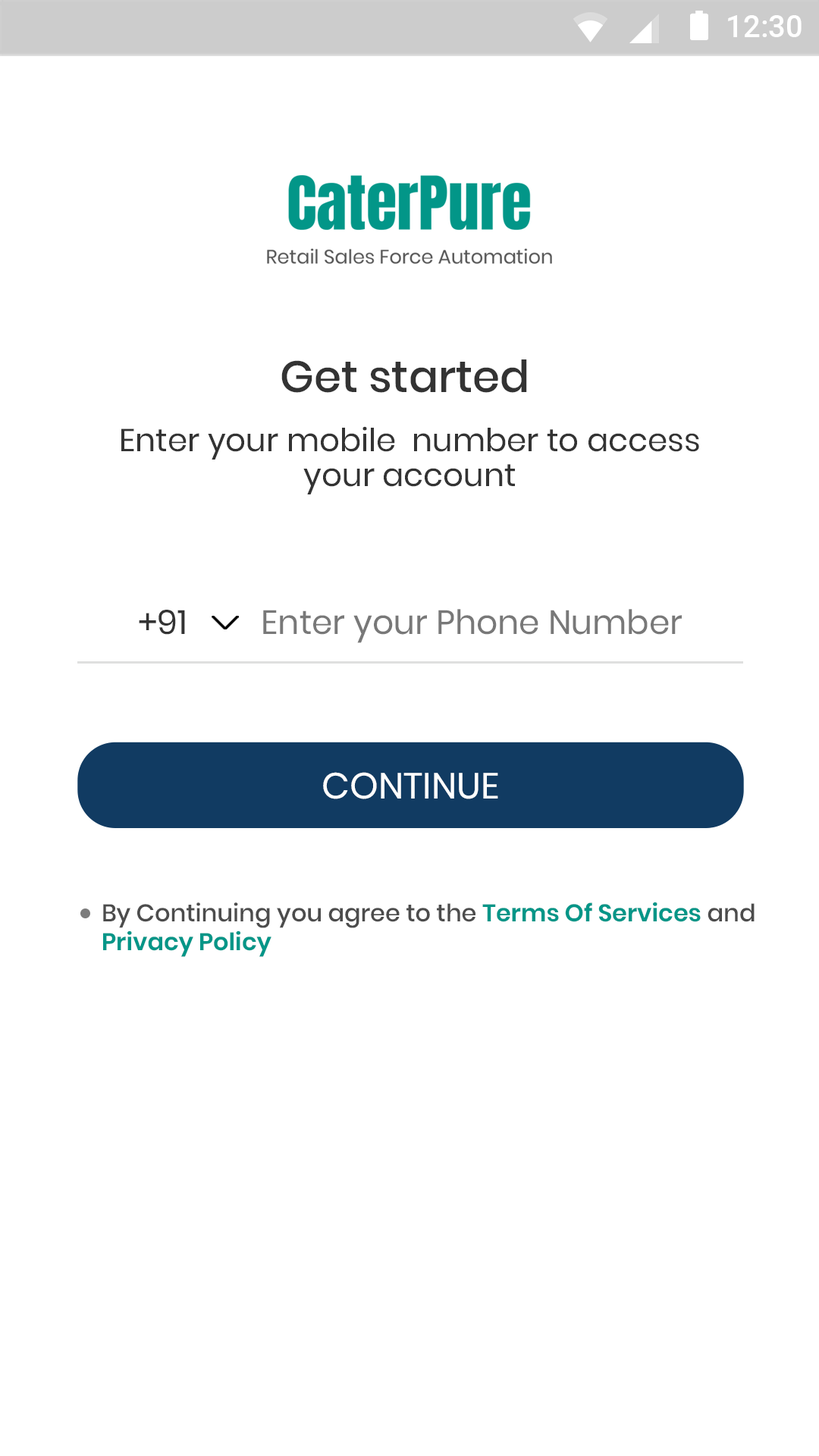
<style>
.page{position:relative;width:819px;height:1456px;background:#ffffff}
.page>*{position:absolute;margin:0}
.t1{font:31.2px "Roboto-Medium";color:#ffffff}
.t2{font:31.8px/59.1px "Poppins-Regular";color:#333333}
.t3{font:44px/59.1px "Poppins-Medium";color:#333333}
.t4{font:31.8px/34.9px "Poppins-Regular";color:#333333}
.t5{font:33.5px "Poppins-Regular";color:#787878}
.t6{font:33.5px "Poppins-Regular";color:#333333}
.t7{font:36.4px "Poppins-Regular";color:#ffffff;text-transform:uppercase}
.t8{font:24.1px "Poppins-Medium";color:#4c4c4c}
.t9{font:24.1px "Poppins-SemiBold";color:#029688}
</style>
<div class="page">
<p class="t1" style="left:728px;top:15px;width:74px;height:22px">12:30</p>
<p class="t2" style="left:121px;top:359px;width:578px;height:135px;text-align:center"><span class="t3">Get started <br></span>Enter your mobile  number to access<br><span class="t4">your account</span></p>
<p class="t5" style="left:139px;top:609px;width:543px;height:34px"><span class="t6">+91         </span>Enter your Phone Number</p>
<p class="t7" style="left:323px;top:772px;width:175px;height:27px">continue</p>
<p class="t8" style="left:103px;top:902px;width:652px;height:55px">By Continuing you agree to the <span class="t9">Terms Of Services </span>and<br><span class="t9">Privacy Policy</span></p>
</div>
